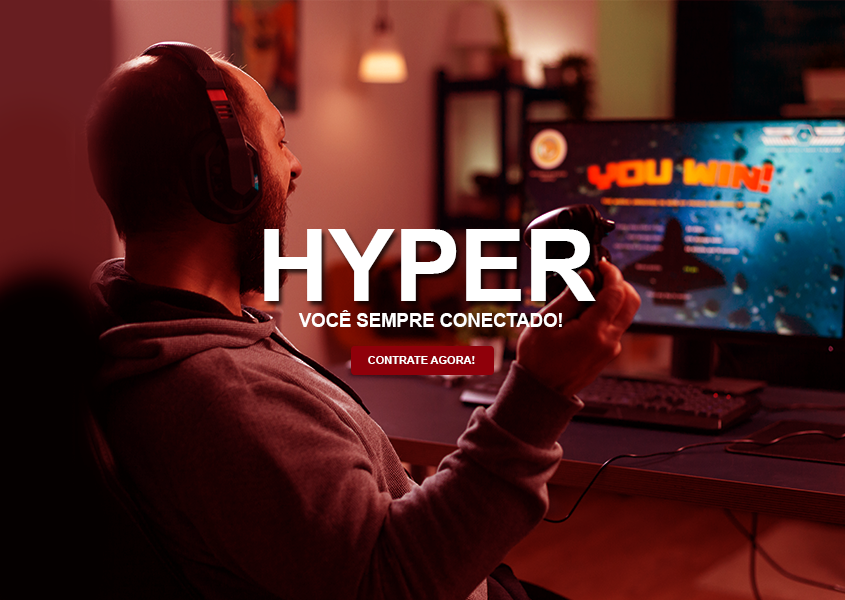
<style>
.page{position:relative;width:845px;height:600px}
.page>*{position:absolute;margin:0}
.t1{font:99.6px "Arial-BoldMT";letter-spacing:-0.01em;color:#ffffff;text-transform:uppercase}
.t2{font:18.7px "Arial-BoldMT";letter-spacing:-0.01em;color:#ffffff;text-transform:uppercase}
.t3{font:11.2px "Arial-BoldMT";letter-spacing:-0.01em;color:#ffffff;text-transform:uppercase}
</style>
<div class="page">
<p class="t1" style="left:264px;top:229px;width:332px;height:72px">HYPER</p>
<p class="t2" style="left:298px;top:310px;width:264px;height:17px">VOCÊ SEMPRE CONECTADO!</p>
<p class="t3" style="left:368px;top:356px;width:107px;height:8px">contrate agora!</p>
</div>
